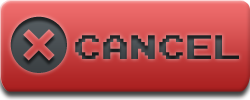
<style>
.page{position:relative;width:250px;height:100px}
.page>*{position:absolute;margin:0}
.t1{font:37px "Joystix"}
</style>
<div class="page">
<p class="t1" style="left:75px;top:35px;width:164px;height:24px">CANCEL</p>
</div>
